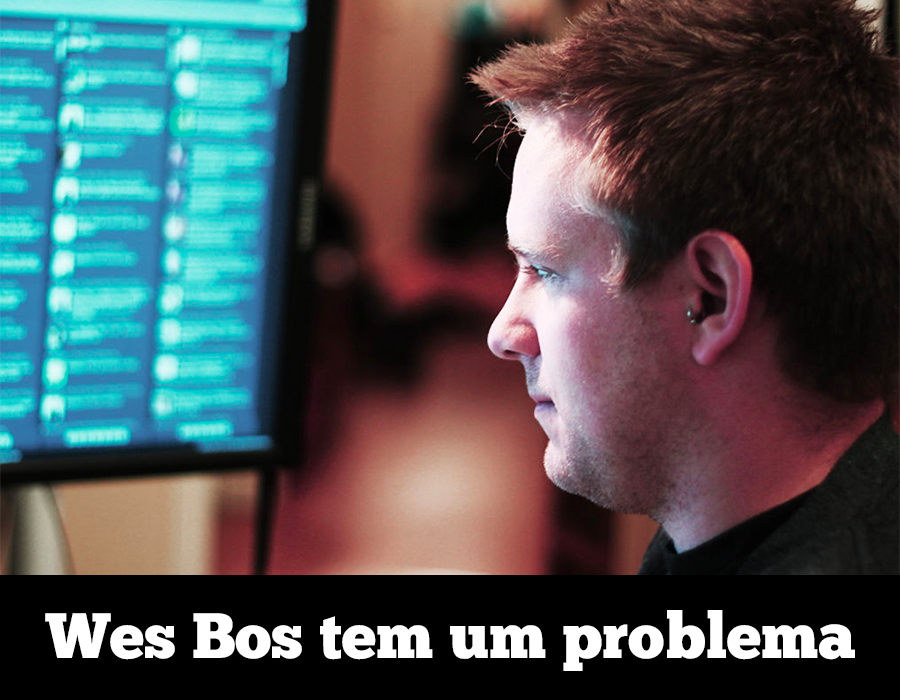
<style>
.page{position:relative;width:900px;height:700px}
.page>*{position:absolute;margin:0}
.t1{font:64px "ChunkFive-Roman";color:#ffffff}
</style>
<div class="page">
<p class="t1" style="left:45px;top:610px;width:810px;height:61px">Wes Bos tem um problema</p>
</div>
